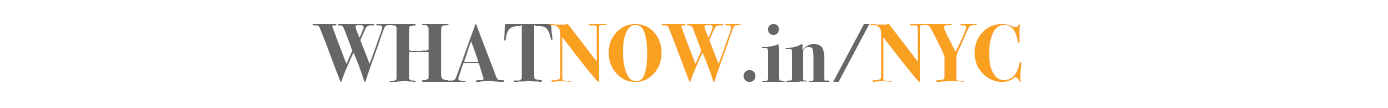
<style>
.page{position:relative;width:1388px;height:108px;background:#ffffff}
.page>*{position:absolute;margin:0}
.t1{font:82px "BodoniSvtyTwoITCTT-Bold";color:#666666}
.t2{font:82px "BodoniSvtyTwoITCTT-Bold";color:#f9a021}
</style>
<div class="page">
<p class="t1" style="left:312px;top:24px;width:710px;height:58px">WHAT<span class="t2">NOW</span>.in/<span class="t2">NYC</span></p>
</div>
